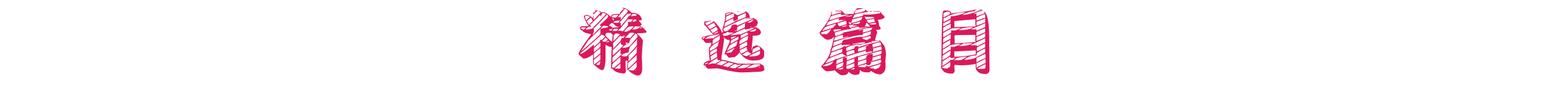
<style>
.page{position:relative;width:1568px;height:88px;background:#ffffff}
.page>*{position:absolute;margin:0}
.t1{font:77.4px "SentyCHALK";color:#db1959}
</style>
<div class="page">
<p class="t1" style="left:579px;top:8px;width:411px;height:68px">精  选  篇  目</p>
</div>
